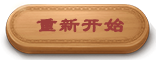
<style>
.page{position:relative;width:156px;height:60px}
.page>*{position:absolute;margin:0}
.t1{font:21.2px "LiSu";letter-spacing:0.04em;color:#9c3d3a;text-transform:uppercase;font-weight:bold}
</style>
<div class="page">
<p class="t1" style="left:36px;top:18px;width:88px;height:15px">重新开始</p>
</div>
